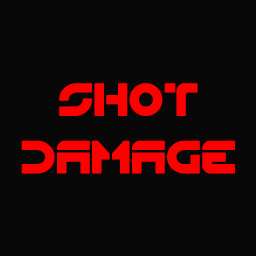
<style>
.page{position:relative;width:256px;height:256px;background:#080808}
.page>*{position:absolute;margin:0}
.t1{font:48px "Flynn";color:#ff0000}
</style>
<div class="page">
<p class="t1" style="left:21px;top:83px;width:214px;height:91px;text-align:center">SHOT<br>DAMAGE</p>
</div>
